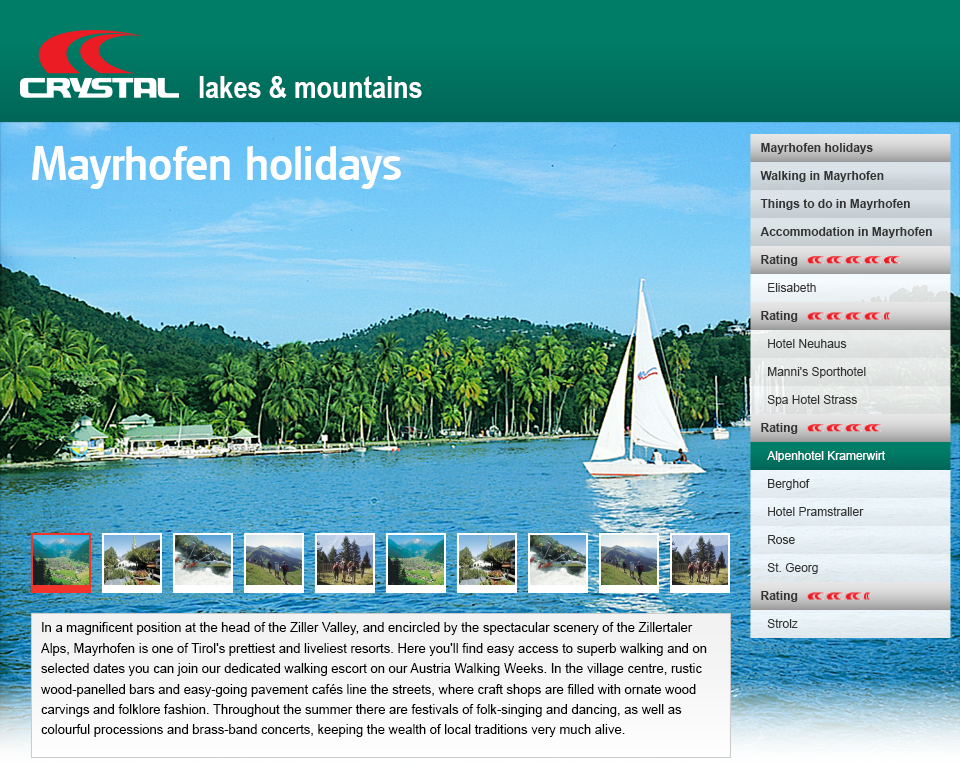
<style>
.page{position:relative;width:960px;height:768px}
.page>*{position:absolute;margin:0}
.t1{font:31px "ArialNarrow-Bold";color:#ffffff}
.t2{font:46.9px "Glasgow-Medium";color:#ffffff}
.t3{font:12.2px/28px "Arial-BoldMT";color:#333333}
.t4{font:12.2px/28px "ArialMT";color:#333333}
.t5{font:12.2px/28px "ArialMT";color:#ffffff}
.t6{font:13px/20.4px "ArialMT";color:#000000}
</style>
<div class="page">
<p class="t1" style="left:199px;top:76px;width:223px;height:22px">lakes &amp; mountains</p>
<p class="t2" style="left:32px;top:146px;width:369px;height:43px">Mayrhofen holidays</p>
<p class="t3" style="left:760px;top:143px;width:172px;height:485px">Mayrhofen holidays<br>Walking in Mayrhofen<br>Things to do in Mayrhofen<br>Accommodation in Mayrhofen<br>Rating<br>  <span class="t4">Elisabeth<br></span>Rating<br>  <span class="t4">Hotel Neuhaus<br>  Manni's Sporthotel<br>  Spa Hotel Strass<br></span>Rating<br>  <span class="t5">Alpenhotel Kramerwirt<br></span><span class="t4">  Berghof<br>  Hotel Pramstraller<br>  Rose<br>  St. Georg<br></span>Rating<br>  <span class="t4">Strolz</span></p>
<p class="t6" style="left:41px;top:622px;width:666px;height:115px">In a magnificent position at the head of the Ziller Valley, and encircled by the spectacular scenery of the Zillertaler Alps, Mayrhofen is one of Tirol's prettiest and liveliest resorts. Here you'll find easy access to superb walking and on selected dates you can join our dedicated walking escort on our Austria Walking Weeks. In the village centre, rustic wood-panelled bars and easy-going pavement cafés line the streets, where craft shops are filled with ornate wood carvings and folklore fashion. Throughout the summer there are festivals of folk-singing and dancing, as well as colourful processions and brass-band concerts, keeping the wealth of local traditions very much alive.</p>
</div>
